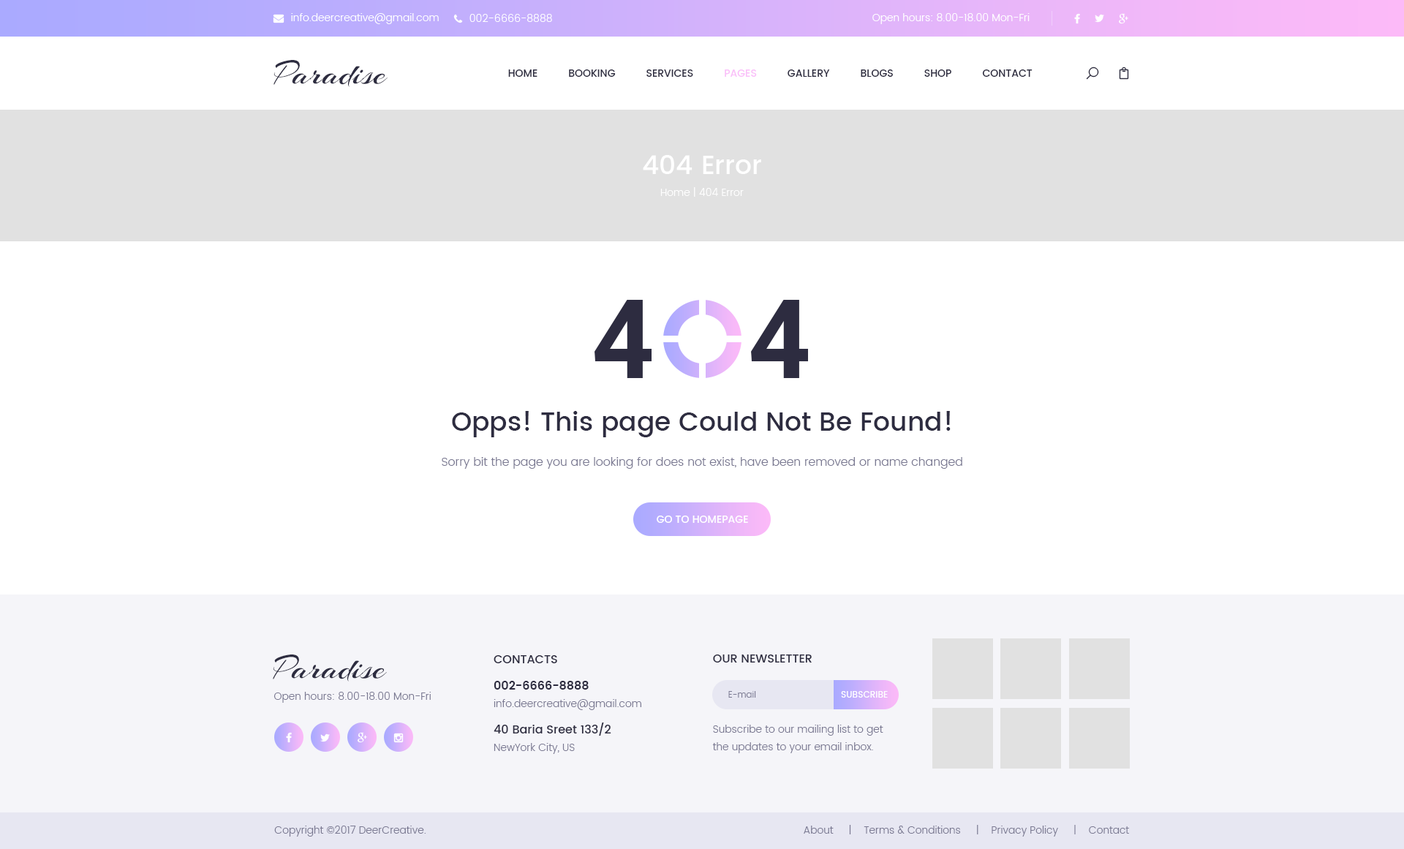
<style>
.page{position:relative;width:1404px;height:849px;background:#ffffff}
.page>*{position:absolute;margin:0}
.t1{font:10.2px "Poppins-Light";color:#ffffff}
.t2{font:35.1px "Arizonia-Regular";color:#2d2c40}
.t3{font:10.2px "Poppins-Medium";color:#2d2c40;text-transform:uppercase}
.t4{font:10.2px "Poppins-Medium";color:#fac0f9;text-transform:uppercase}
.t5{font:10.2px/21.9px "Poppins-Light";color:#ffffff}
.t6{font:26.3px/21.9px "Poppins-Medium";color:#ffffff}
.t7{font:109.7px "Roboto-Bold";letter-spacing:0.3em;color:#2d2c40}
.t8{font:11.7px/19px "Poppins-Light";color:#7a7992}
.t9{font:26.3px/26.3px "Poppins-Medium";color:#2d2c40}
.t10{font:11.7px/35.1px "Poppins-Light";color:#7a7992}
.t11{font:10.2px "Poppins-Medium";color:#ffffff;text-transform:uppercase}
.t12{font:10.2px/17.6px "Poppins-Light";color:#7a7992}
.t13{font:11.7px/26.3px "Poppins-Medium";color:#2d2c40;text-transform:uppercase}
.t14{font:11.7px/26.3px "Poppins-SemiBold";color:#2d2c40}
.t15{font:11.7px/26.3px "Poppins-Medium";color:#2d2c40}
.t16{font:11.7px "Poppins-Medium";color:#2d2c40;text-transform:uppercase}
.t17{font:10.2px "Poppins-Light";color:#7a7992}
.t18{font:8.8px "Poppins-Light";color:#7a7992}
.t19{font:8.8px "Poppins-Medium";color:#ffffff;text-transform:uppercase}
</style>
<div class="page">
<p class="t1" style="left:291px;top:13px;width:148px;height:11px">info.deercreative@gmail.com</p>
<p class="t1" style="left:470px;top:14px;width:82px;height:8px">002-6666-8888</p>
<p class="t1" style="left:873px;top:13px;width:157px;height:11px">Open hours: 8.00-18.00 Mon-Fri</p>
<p class="t2" style="left:274px;top:60px;width:114px;height:27px">Paradise</p>
<p class="t3" style="left:508px;top:69px;width:525px;height:8px">Home          Booking          Services        <span class="t4">  Pages      </span>    Gallery          Blogs          Shop          Contact</p>
<p class="t5" style="left:643px;top:155px;width:118px;height:42px;text-align:center"><span class="t6">404 Error<br></span>Home | 404 Error</p>
<p class="t7" style="left:595px;top:300px;width:213px;height:78px">4 4</p>
<p class="t8" style="left:442px;top:411px;width:521px;height:58px;text-align:center"><span class="t9">Opps! This page Could Not Be Found!<br></span><span class="t10">Sorry</span> bit the page you are looking for does not exist, have been removed or name changed</p>
<p class="t11" style="left:657px;top:516px;width:91px;height:7px">Go to homepage</p>
<p class="t2" style="left:273px;top:655px;width:114px;height:27px">Paradise</p>
<p class="t12" style="left:494px;top:655px;width:147px;height:99px"><span class="t13">Contacts<br></span><span class="t14">002-6666-8888<br></span>info.deercreative@gmail.com<br><span class="t15">40 Baria Sreet 133/2<br></span>NewYork City, US</p>
<p class="t16" style="left:713px;top:655px;width:99px;height:8px">Our Newsletter</p>
<p class="t17" style="left:274px;top:692px;width:158px;height:11px">Open hours: 8.00-18.00 Mon-Fri</p>
<p class="t18" style="left:728px;top:691px;width:28px;height:7px">E-mail</p>
<p class="t19" style="left:841px;top:691px;width:47px;height:7px">Subscribe</p>
<p class="t12" style="left:712px;top:725px;width:172px;height:28px">Subscribe to our mailing list to get the updates to your email inbox.</p>
<p class="t17" style="left:274px;top:826px;width:152px;height:11px">Copyright ©2017 DeerCreative.</p>
<p class="t17" style="left:804px;top:825px;width:325px;height:12px">About     |    Terms &amp; Conditions     |    Privacy Policy     |    Contact</p>
</div>
